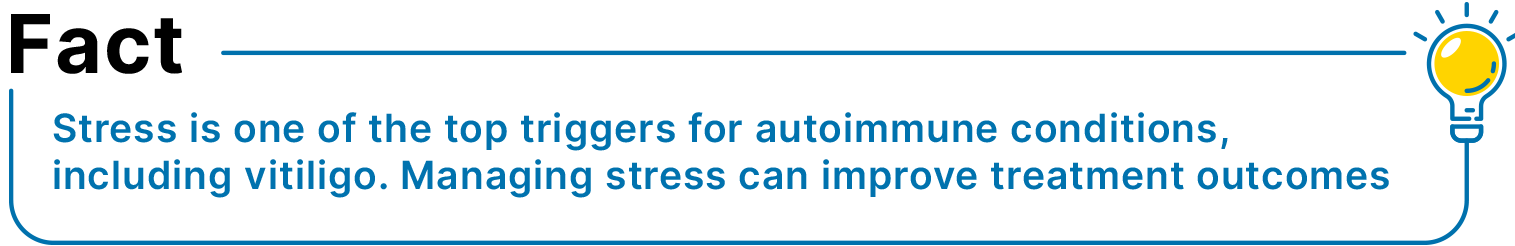
<style>
.page{position:relative;width:1515px;height:246px;background:#ffffff}
.page>*{position:absolute;margin:0}
.t1{font:81px "Inter-Bold";letter-spacing:0.025em;color:#000000}
.t2{font:39px "Inter-SemiBold";letter-spacing:0.025em;color:#0072ae}
</style>
<div class="page">
<p class="t1" style="left:11px;top:14px;width:171px;height:60px">Fact</p>
<p class="t2" style="left:53px;top:112px;width:1336px;height:86px">Stress is one of the top triggers for autoimmune conditions,<br>including vitiligo. Managing stress can improve treatment outcomes</p>
</div>
